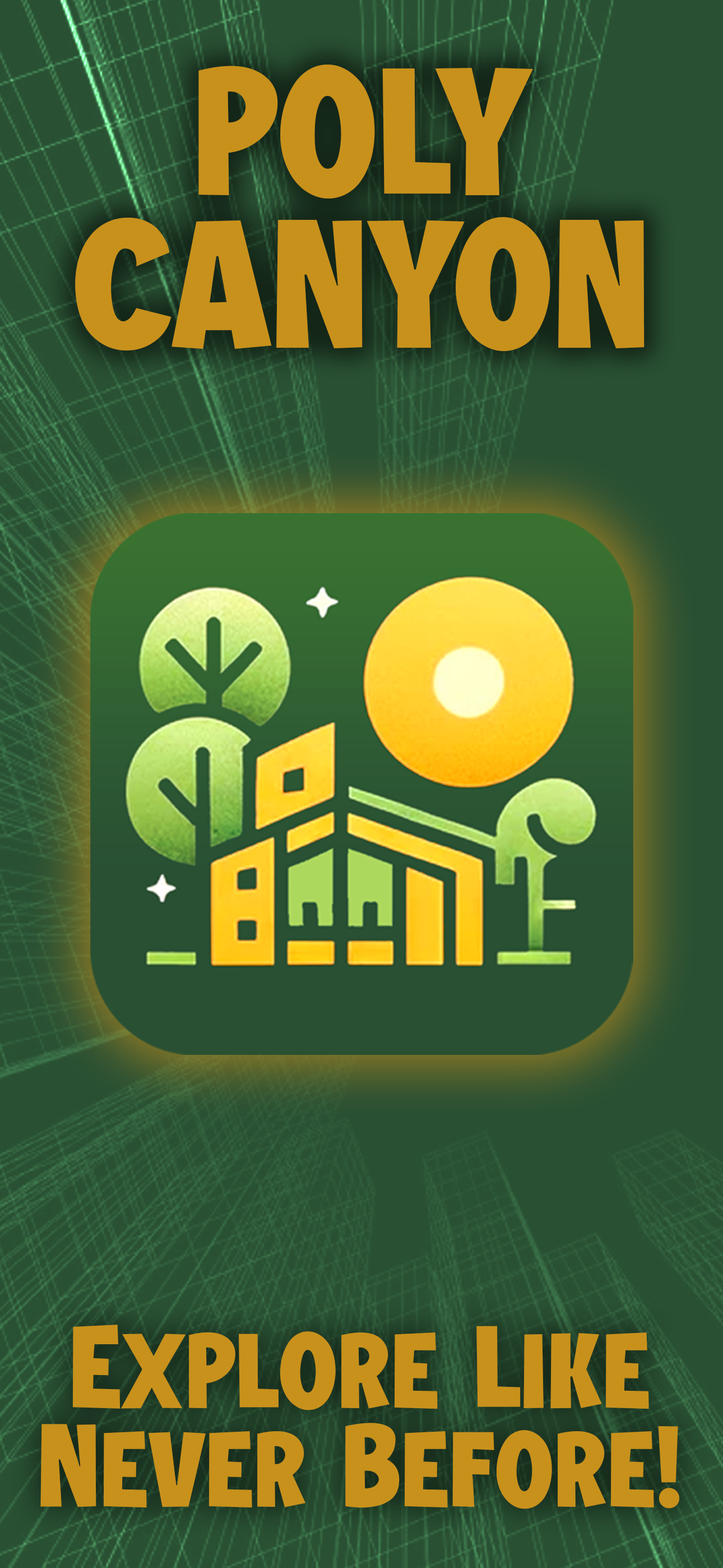
<style>
.page{position:relative;width:723px;height:1568px;background:#295033}
.page>*{position:absolute;margin:0}
.t1{font:183.2px/152.8px "JungleAdventurerRegular";color:#c8911c}
.t2{font:118.2px/98.9px "JungleAdventurerRegular";color:#c8911c}
</style>
<div class="page">
<p class="t1" style="left:75px;top:64px;width:570px;height:287px;text-align:center">POLY<br>CANYON</p>
<p class="t2" style="left:40px;top:1325px;width:640px;height:184px;text-align:center">Explore Like<br>Never Before!</p>
</div>
